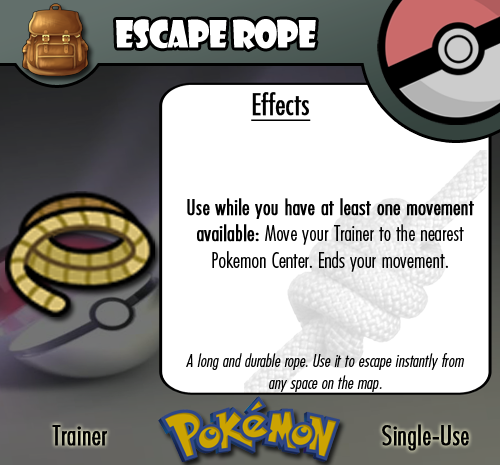
<style>
.page{position:relative;width:500px;height:465px;background:#ffffff}
.page>*{position:absolute;margin:0}
.t1{font:36.7px "ShowcardGothic-Reg";letter-spacing:-0.025em;color:#ffffff;scale:0.91 1}
.t2{font:22.2px "FuturaCondensedBQ-Light";color:#010101}
.t3{font:27.8px "FuturaCondensedBQ-Light";color:#010101;font-weight:bold}
.t4{font:30.6px "FuturaCondensedBQ-Light";color:#010101;font-weight:bold;text-decoration:underline}
.t5{font:22.2px "FuturaCondensedBQ-Light";color:#010101;font-weight:bold}
.t6{font:18.1px "FuturaCondensedBQ-Light";color:#010101;font-style:italic}
</style>
<div class="page">
<p class="t1" style="left:116px;top:19px;width:200px;height:31px">Escape Rope</p>
<p class="t2" style="left:187px;top:92px;width:287px;height:180px"><span class="t3">  </span><span class="t4">Effects<br><br><br><br><br><br></span><span class="t5">Use while you have at least one movement available: </span>Move your Trainer to the nearest Pokemon Center. Ends your movement.</p>
<p class="t6" style="left:186px;top:353px;width:278px;height:39px;text-align:center">A long and durable rope. Use it to escape instantly from any space on the map.</p>
<p class="t3" style="left:52px;top:425px;width:55px;height:21px">Trainer</p>
<p class="t3" style="left:382px;top:424px;width:87px;height:27px">Single-Use</p>
</div>
